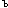
<style>
.page{position:relative;width:8px;height:8px;background:#ffffff}
.page>*{position:absolute;margin:0}
.t1{font:8px "WebPlus_HP_100LX_6x8";color:#000000}
</style>
<div class="page">
<p class="t1" style="left:2px;top:0px;width:6px;height:7px">Ъ</p>
</div>
